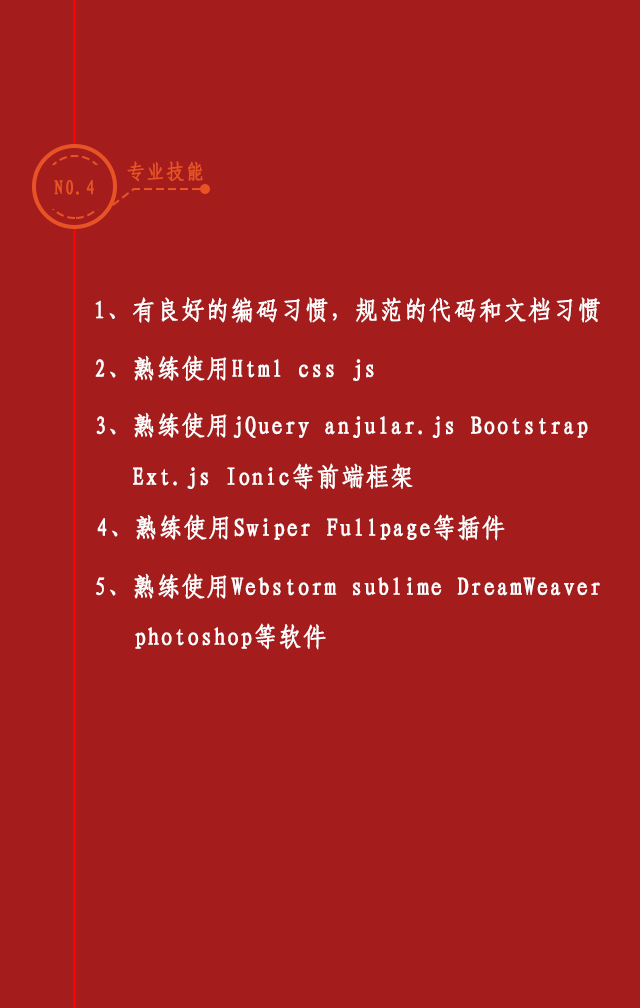
<style>
.page{position:relative;width:640px;height:1008px;background:#a41c1c}
.page>*{position:absolute;margin:0}
.t1{font:20px "-G-s-u-n-0-0-m";letter-spacing:0.05em;color:#e85326;font-weight:bold;scale:0.92 1}
.t2{font:25px "-G-s-u-n-0-0-m";letter-spacing:0.05em;color:#fefcfc;font-weight:bold;scale:0.92 1}
</style>
<div class="page">
<p class="t1" style="left:127px;top:161px;width:76px;height:21px">专业技能</p>
<p class="t1" style="left:54px;top:180px;width:40px;height:15px">N0.4</p>
<p class="t2" style="left:95px;top:297px;width:505px;height:26px">1、有良好的编码习惯，规范的代码和文档习惯</p>
<p class="t2" style="left:95px;top:355px;width:279px;height:26px">2、熟练使用Html css js</p>
<p class="t2" style="left:96px;top:412px;width:492px;height:26px">3、熟练使用jQuery anjular.js Bootstrap</p>
<p class="t2" style="left:133px;top:463px;width:280px;height:27px">Ext.js Ionic等前端框架</p>
<p class="t2" style="left:97px;top:514px;width:408px;height:27px">4、熟练使用Swiper Fullpage等插件</p>
<p class="t2" style="left:96px;top:573px;width:504px;height:26px">5、熟练使用Webstorm sublime DreamWeaver</p>
<p class="t2" style="left:135px;top:623px;width:191px;height:27px">photoshop等软件</p>
</div>
